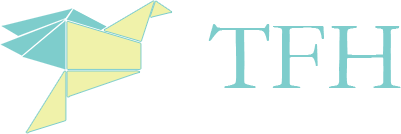
<style>
.page{position:relative;width:401px;height:134px;background:#ffffff}
.page>*{position:absolute;margin:0}
.t1{font:100px "Garamond";color:#7ecdcc}
</style>
<div class="page">
<p class="t1" style="left:208px;top:24px;width:193px;height:64px">TFH</p>
</div>
